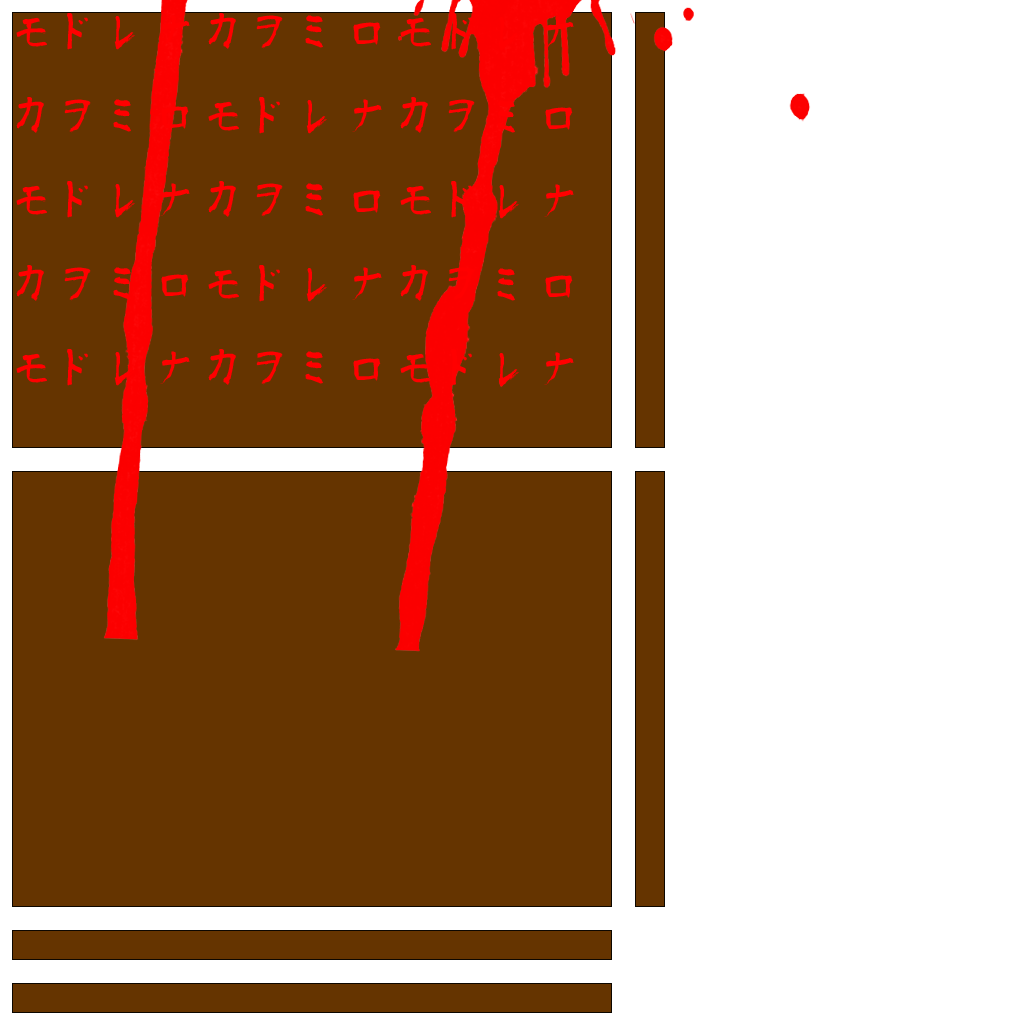
<style>
.page{position:relative;width:1024px;height:1024px;background:#653400}
.page>*{position:absolute;margin:0}
.t1{font:48px "aoyagireisyosimo2";color:#ff0000}
</style>
<div class="page">
<p class="t1" style="left:16px;top:13px;width:558px;height:374px">モドレナカヲミロモドレナカヲミロモドレナカヲミロモドレナカヲミロモドレナカヲミロモドレナカヲミロモドレナカヲミロモドレナカヲミロモドレナカヲミロモドレナカヲミロ</p>
</div>
